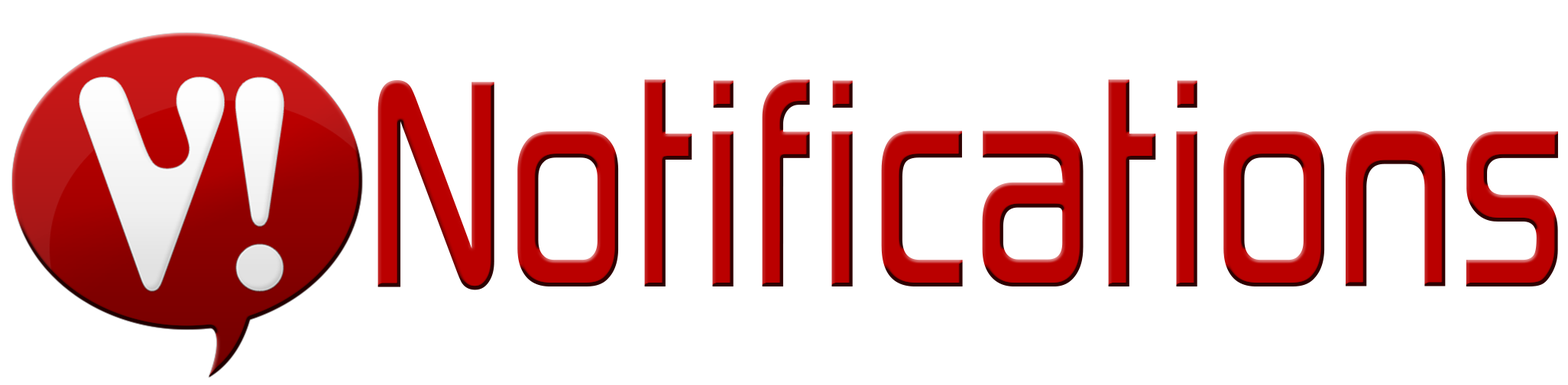
<style>
.page{position:relative;width:1568px;height:385px;background:#ffffff}
.page>*{position:absolute;margin:0}
.t1{font:422.6px "SonySketchEF";color:#ba0000;scale:0.57 1}
</style>
<div class="page">
<p class="t1" style="left:377px;top:79px;width:1181px;height:211px">Notifications</p>
</div>
